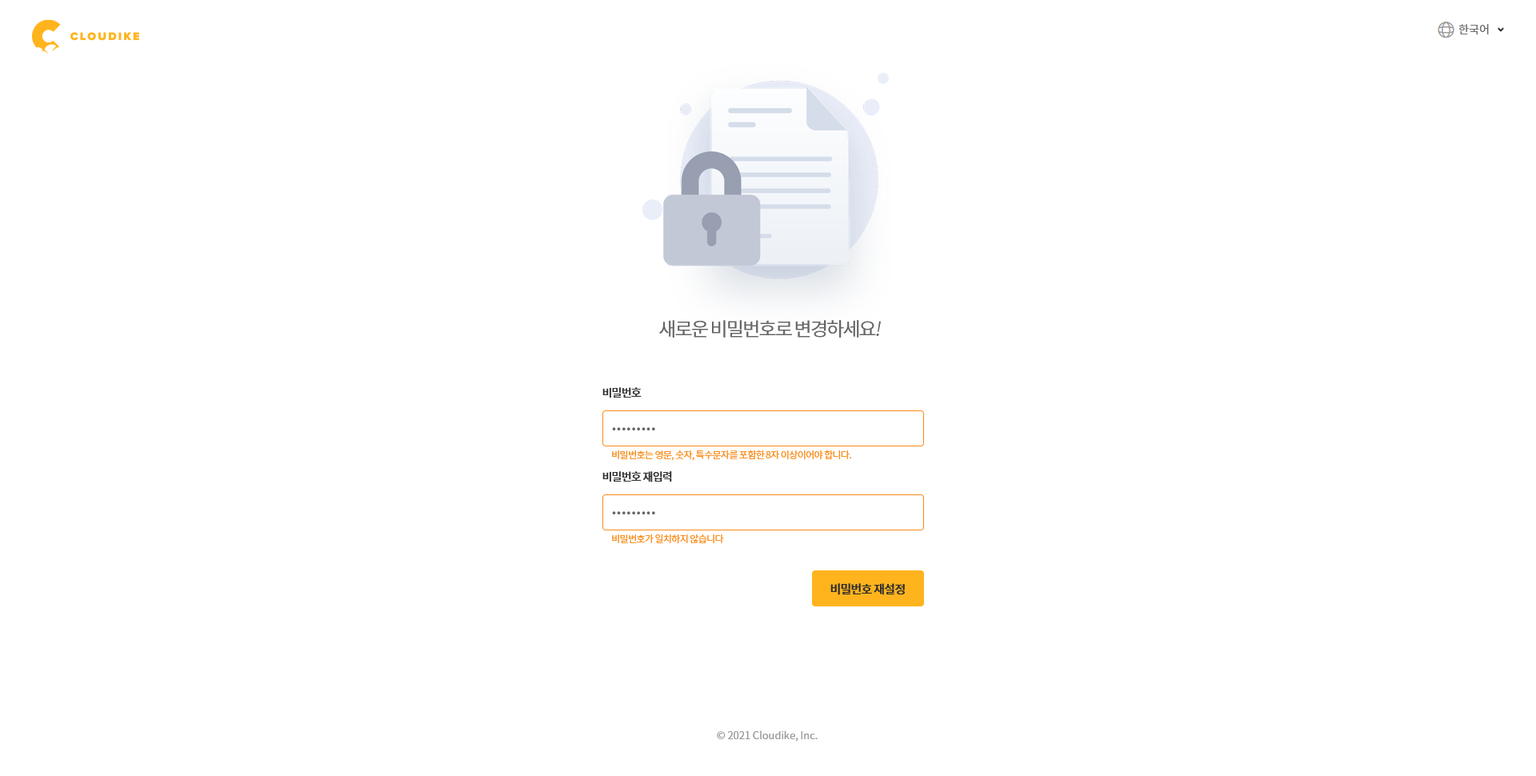
<style>
.page{position:relative;width:1536px;height:776px;background:#ffffff}
.page>*{position:absolute;margin:0}
.t1{font:11.2px "NotoSansCJKkr-DemiLight";color:#666666}
.t2{font:19.2px "NotoSansCJKkr-DemiLight";letter-spacing:-0.075em;color:#666666}
.t3{font:19.2px "NotoSansCJKkr-DemiLight";letter-spacing:-0.075em;color:#666666;font-style:italic}
.t4{font:11.2px "NotoSansCJKkr-Medium";letter-spacing:-0.05em;color:#333333}
.t5{font:22.4px "NotoSansCJKkr-DemiLight";letter-spacing:-0.05em;color:#666666}
.t6{font:9.6px "NotoSansCJKkr-DemiLight";letter-spacing:-0.05em;color:#f98a17}
.t7{font:12px "NotoSansCJKkr-Medium";letter-spacing:-0.05em;color:#2d2d2d}
.t8{font:10.4px "NotoSansCJKkr-DemiLight";color:#999999}
</style>
<div class="page">
<p class="t1" style="left:1459px;top:24px;width:30px;height:11px">한국어</p>
<p class="t2" style="left:659px;top:320px;width:222px;height:18px">새로운 비밀번호로 변경하세요<span class="t3">!</span></p>
<p class="t4" style="left:603px;top:387px;width:39px;height:11px">비밀번호</p>
<p class="t5" style="left:612px;top:427px;width:43px;height:3px">.........</p>
<p class="t6" style="left:612px;top:450px;width:239px;height:11px">비밀번호는 영문, 숫자, 특수문자를 포함한 8자 이상이어야 합니다.</p>
<p class="t4" style="left:603px;top:471px;width:69px;height:12px">비밀번호 재입력</p>
<p class="t5" style="left:612px;top:511px;width:43px;height:4px">.........</p>
<p class="t6" style="left:612px;top:534px;width:112px;height:10px">비밀번호가 일치하지 않습니다</p>
<p class="t7" style="left:831px;top:583px;width:74px;height:12px">비밀번호 재설정</p>
<p class="t8" style="left:717px;top:731px;width:101px;height:11px">© 2021 Cloudike, Inc.</p>
</div>
